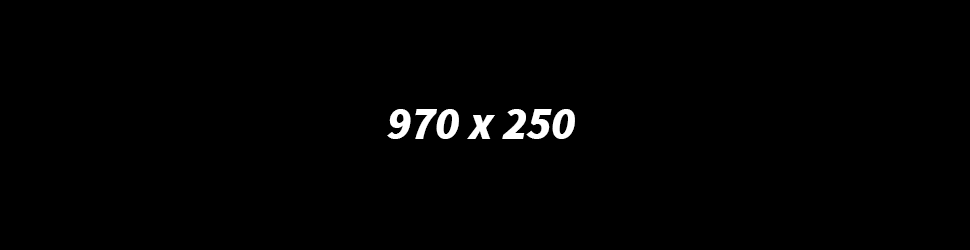
<style>
.page{position:relative;width:970px;height:250px;background:#000000}
.page>*{position:absolute;margin:0}
.t1{font:46.8px "SourceSansPro-BlackIt";color:#ffffff}
</style>
<div class="page">
<p class="t1" style="left:387px;top:109px;width:188px;height:30px">970 x 250</p>
</div>
